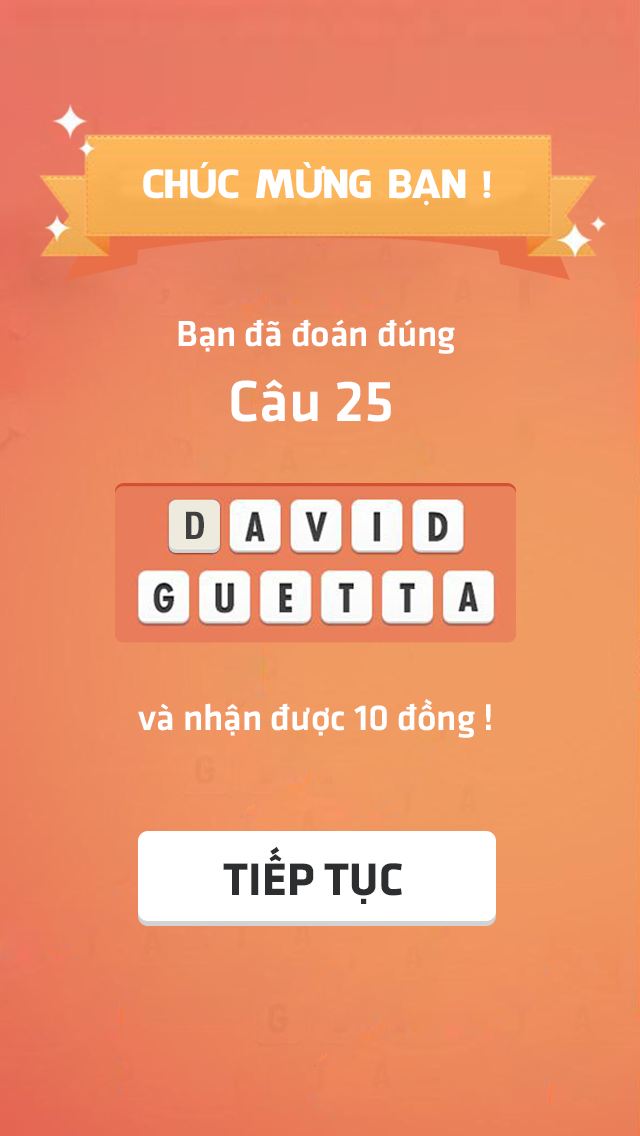
<style>
.page{position:relative;width:640px;height:1136px}
.page>*{position:absolute;margin:0}
.t1{font:38px "UTM-Facebook";color:#ffffff}
.t2{font:37.5px "UTM-Facebook-K&T";color:#ffffff}
.t3{font:60px "UTM-Facebook-K&T";color:#ffffff}
.t4{font:38px "HelveticaNeueLTStd-BdCn";color:#404040}
.t5{font:47.2px "UTMFacebookK&TBold";color:#2d2e2f}
</style>
<div class="page">
<p class="t1" style="left:143px;top:162px;width:348px;height:44px">CHÚC MỪNG BẠN !</p>
<p class="t2" style="left:178px;top:319px;width:277px;height:35px">Bạn đã đoán đúng</p>
<p class="t3" style="left:231px;top:379px;width:160px;height:43px">Câu 25</p>
<p class="t4" style="left:186px;top:511px;width:18px;height:28px">D</p>
<p class="t2" style="left:138px;top:699px;width:353px;height:39px">và nhận được 10 đồng !</p>
<p class="t5" style="left:223px;top:846px;width:179px;height:58px">TIẾP TỤC</p>
</div>
